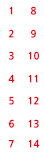
<style>
.page{position:relative;width:44px;height:154px;background:#ffffff}
.page>*{position:absolute;margin:0}
.t1{font:10px "NanumGothicExtraBold";color:#e60012}
</style>
<div class="page">
<p class="t1" style="left:9px;top:6px;width:4px;height:9px">1</p>
<p class="t1" style="left:31px;top:6px;width:5px;height:9px">8</p>
<p class="t1" style="left:9px;top:29px;width:5px;height:9px">2</p>
<p class="t1" style="left:31px;top:29px;width:5px;height:9px">9</p>
<p class="t1" style="left:9px;top:51px;width:5px;height:9px">3</p>
<p class="t1" style="left:28px;top:51px;width:11px;height:9px">10</p>
<p class="t1" style="left:8px;top:74px;width:7px;height:9px">4</p>
<p class="t1" style="left:28px;top:74px;width:10px;height:9px">11</p>
<p class="t1" style="left:9px;top:96px;width:5px;height:9px">5</p>
<p class="t1" style="left:28px;top:96px;width:11px;height:9px">12</p>
<p class="t1" style="left:9px;top:119px;width:5px;height:9px">6</p>
<p class="t1" style="left:28px;top:119px;width:11px;height:9px">13</p>
<p class="t1" style="left:9px;top:140px;width:5px;height:8px">7</p>
<p class="t1" style="left:28px;top:139px;width:12px;height:9px">14</p>
</div>
